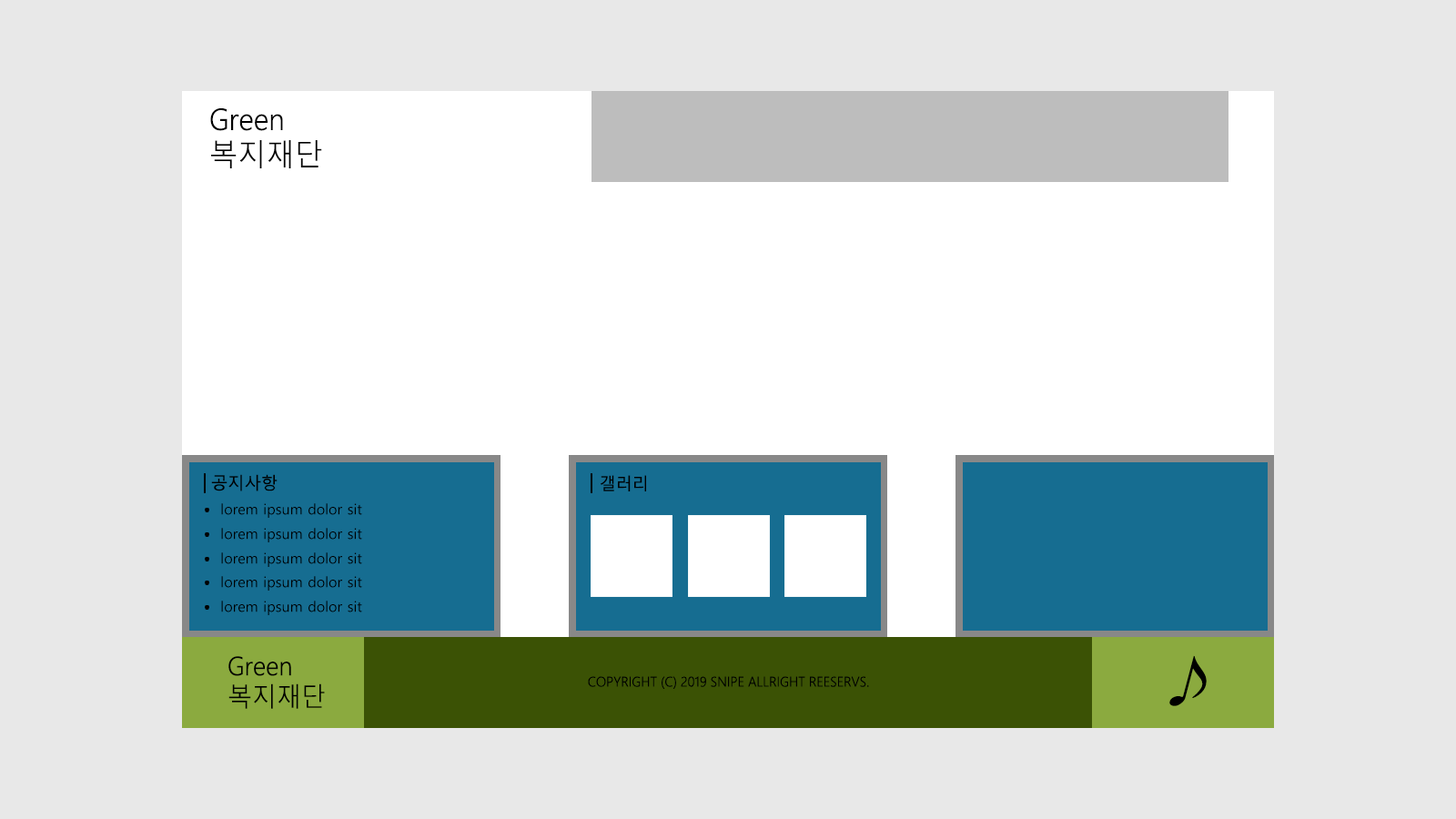
<style>
.page{position:relative;width:1456px;height:819px;background:#e8e8e8}
.page>*{position:absolute;margin:0}
.t1{font:29.7px "MalgunGothic-Semilight";color:#000000;scale:0.96 1}
.t2{font:16.8px "MalgunGothic";color:#000000}
.t3{font:14.4px "MalgunGothic";color:#000000}
.t4{font:25.8px "MalgunGothic-Semilight";color:#000000;scale:0.95 1}
.t5{font:66.9px "MalgunGothic-Semilight";color:#000000;scale:0.96 1}
.t6{font:13.7px "MalgunGothic-Semilight";color:#000000;scale:0.96 1}
</style>
<div class="page">
<p class="t1" style="left:210px;top:108px;width:112px;height:60px">Green<br>복지재단</p>
<p class="t2" style="left:211px;top:474px;width:67px;height:17px">공지사항</p>
<p class="t2" style="left:601px;top:475px;width:45px;height:16px">갤러리</p>
<p class="t3" style="left:221px;top:503px;width:141px;height:15px">lorem ipsum dolor sit</p>
<p class="t3" style="left:221px;top:528px;width:141px;height:14px">lorem ipsum dolor sit</p>
<p class="t3" style="left:221px;top:552px;width:141px;height:15px">lorem ipsum dolor sit</p>
<p class="t3" style="left:221px;top:576px;width:141px;height:15px">lorem ipsum dolor sit</p>
<p class="t3" style="left:221px;top:601px;width:141px;height:14px">lorem ipsum dolor sit</p>
<p class="t4" style="left:228px;top:656px;width:97px;height:53px">Green<br>복지재단</p>
<p class="t5" style="left:1169px;top:655px;width:38px;height:51px;rotate:15deg">♪</p>
<p class="t6" style="left:588px;top:676px;width:281px;height:13px">COPYRIGHT (C) 2019 SNIPE ALLRIGHT REESERVS.</p>
</div>
